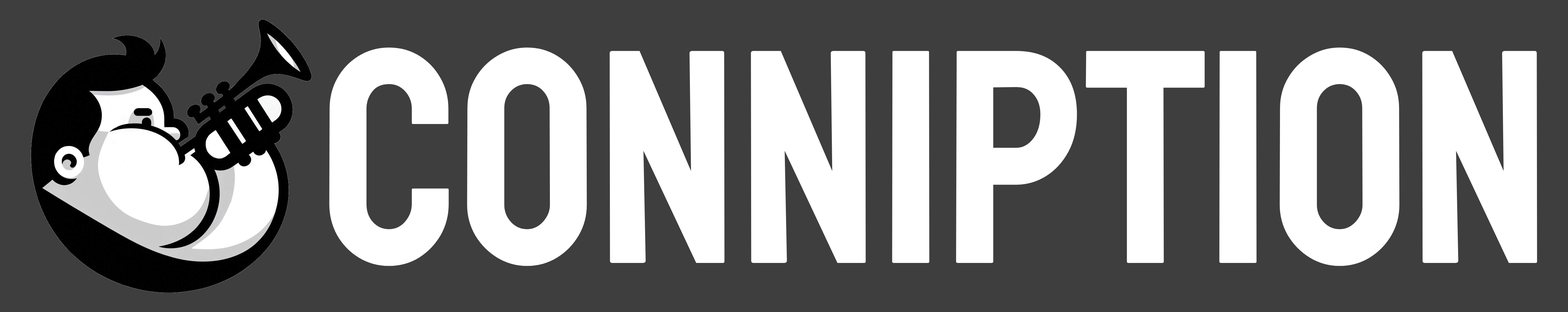
<style>
.page{position:relative;width:1568px;height:312px;background:#3e3e3e}
.page>*{position:absolute;margin:0}
.t1{font:304.5px "Koulen-Regular";color:#ffffff}
</style>
<div class="page">
<p class="t1" style="left:329px;top:47px;width:1208px;height:219px">Conniption</p>
</div>
